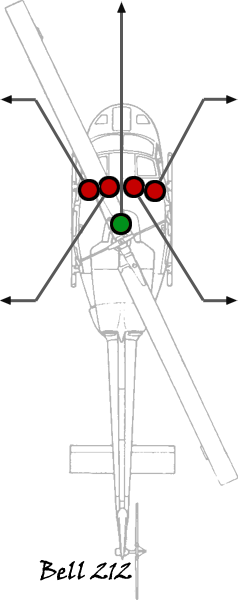
<style>
.page{position:relative;width:238px;height:600px;background:#ffffff}
.page>*{position:absolute;margin:0}
.t1{font:24px "VinerHandITC";color:#000000}
</style>
<div class="page">
<p class="t1" style="left:39px;top:560px;width:93px;height:21px">Bell 212</p>
</div>
